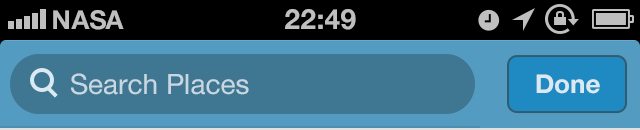
<style>
.page{position:relative;width:640px;height:130px;background:#3f7692}
.page>*{position:absolute;margin:0}
.t1{font:28px "HelveticaNeue";color:#c6d8e1}
.t2{font:26px "HelveticaNeue-Bold";color:#dbeaf2}
</style>
<div class="page">
<p class="t1" style="left:71px;top:73px;width:178px;height:22px">Search Places</p>
<p class="t2" style="left:536px;top:74px;width:64px;height:20px">Done</p>
</div>
